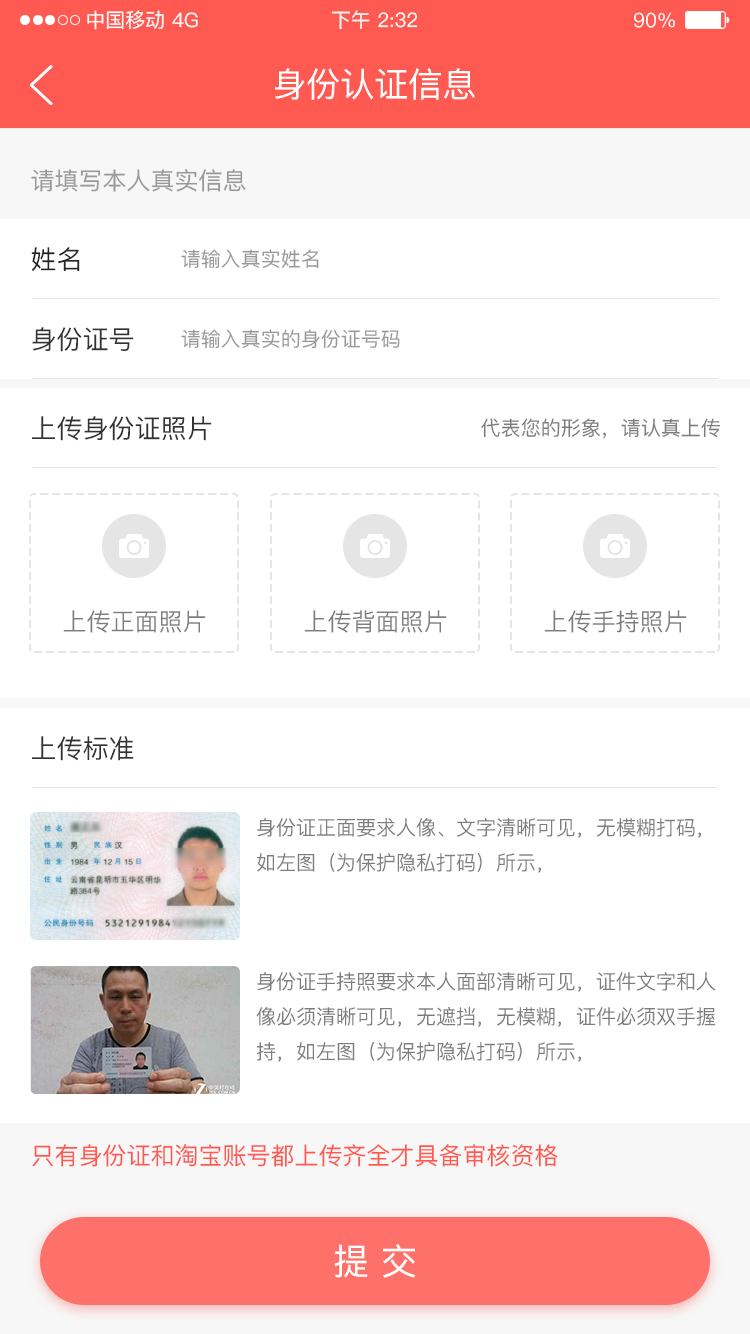
<style>
.page{position:relative;width:750px;height:1334px;background:#ffffff}
.page>*{position:absolute;margin:0}
.t1{font:20px "PingFang-SC-Medium";color:#ffffff}
.t2{font:34px "PingFang-SC-Medium";color:#ffffff}
.t3{font:24px "PingFang-SC-Medium";color:#999999}
.t4{font:26px "PingFang-SC-Medium";color:#262626}
.t5{font:20px "PingFang-SC-Medium";color:#999999}
.t6{font:26px "PingFang-SC-Medium";color:#333333}
.t7{font:20px "PingFang-SC-Medium";color:#7d7d7d}
.t8{font:24px "PingFang-SC-Regular";color:#7d7d7d}
.t9{font:20px "PingFang-SC-Regular";color:#7d7d7d}
.t10{font:24px "PingFang-SC-Medium";color:#fe5a51}
.t11{font:36px "PingFang-SC-Medium";color:#ffffff}
</style>
<div class="page">
<p class="t1" style="left:87px;top:10px;width:77px;height:20px">中国移动</p>
<p class="t1" style="left:172px;top:12px;width:26px;height:16px">4G</p>
<p class="t1" style="left:331px;top:10px;width:87px;height:20px">下午 2:32</p>
<p class="t1" style="left:634px;top:12px;width:41px;height:16px">90%</p>
<p class="t2" style="left:275px;top:68px;width:200px;height:32px">身份认证信息</p>
<p class="t3" style="left:31px;top:169px;width:215px;height:23px">请填写本人真实信息</p>
<p class="t4" style="left:31px;top:247px;width:49px;height:24px">姓名</p>
<p class="t5" style="left:181px;top:249px;width:138px;height:20px">请输入真实姓名</p>
<p class="t6" style="left:32px;top:327px;width:102px;height:25px">身份证号</p>
<p class="t5" style="left:181px;top:329px;width:219px;height:20px">请输入真实的身份证号码</p>
<p class="t6" style="left:32px;top:416px;width:180px;height:25px">上传身份证照片</p>
<p class="t7" style="left:481px;top:418px;width:240px;height:21px">代表您的形象，请认真上传</p>
<p class="t8" style="left:63px;top:610px;width:143px;height:23px">上传正面照片</p>
<p class="t8" style="left:304px;top:610px;width:143px;height:23px">上传背面照片</p>
<p class="t8" style="left:544px;top:610px;width:143px;height:23px">上传手持照片</p>
<p class="t6" style="left:32px;top:736px;width:102px;height:25px">上传标准</p>
<p class="t9" style="left:257px;top:818px;width:444px;height:55px">身份证正面要求人像、文字清晰可见，无模糊打码，如左图（为保护隐私打码）所示，</p>
<p class="t9" style="left:256px;top:972px;width:460px;height:90px">身份证手持照要求本人面部清晰可见，证件文字和人像必须清晰可见，无遮挡，无模糊，证件必须双手握持，如左图（为保护隐私打码）所示，</p>
<p class="t10" style="left:32px;top:1144px;width:526px;height:23px">只有身份证和淘宝账号都上传齐全才具备审核资格</p>
<p class="t11" style="left:334px;top:1244px;width:82px;height:34px">提 交</p>
</div>
